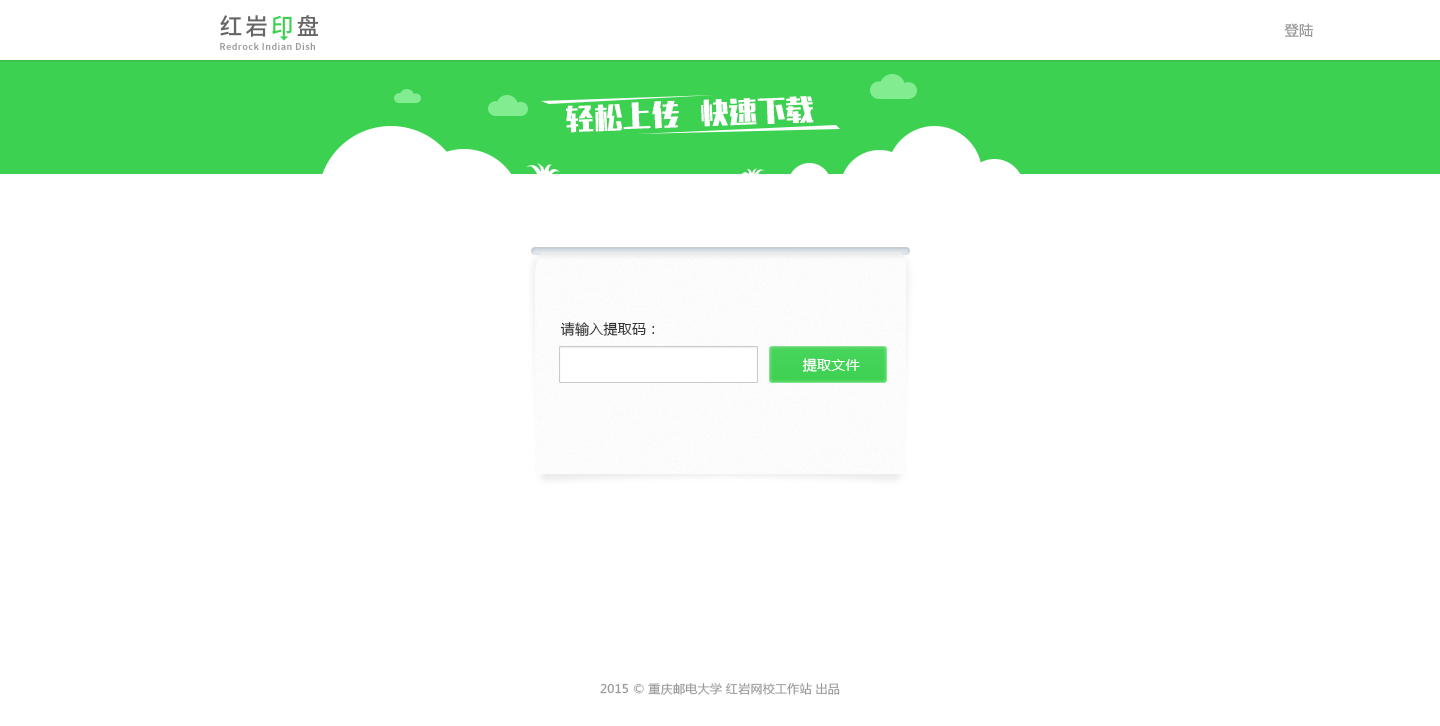
<style>
.page{position:relative;width:1440px;height:726px;background:#ffffff}
.page>*{position:absolute;margin:0}
.t1{font:14px "MicrosoftYaHei";letter-spacing:0.02em;color:#999999}
.t2{font:9.3px "SourceHanSansCN-Bold";letter-spacing:0.05em;color:#999999;scale:0.96 1}
.t3{font:28px "MFLiHei_Noncommercial-Regular";letter-spacing:0.02em;color:#ffffff}
.t4{font:14px "MicrosoftYaHei";letter-spacing:0.02em;color:#333333}
.t5{font:14px "MicrosoftYaHei";letter-spacing:0.02em;color:#ffffff}
.t6{font:11.7px "MicrosoftYaHei";letter-spacing:0.02em;color:#999999}
</style>
<div class="page">
<p class="t1" style="left:1284px;top:23px;width:29px;height:14px">登陆</p>
<p class="t2" style="left:220px;top:42px;width:95px;height:8px">Redrock Indian Dish</p>
<p class="t3" style="left:566px;top:96px;width:248px;height:37px;rotate:-2deg">轻松上传   快速下载</p>
<p class="t4" style="left:560px;top:322px;width:95px;height:15px">请输入提取码：</p>
<p class="t5" style="left:802px;top:358px;width:58px;height:14px">提取文件</p>
<p class="t6" style="left:600px;top:682px;width:240px;height:13px">2015 © 重庆邮电大学 红岩网校工作站 出品</p>
</div>
